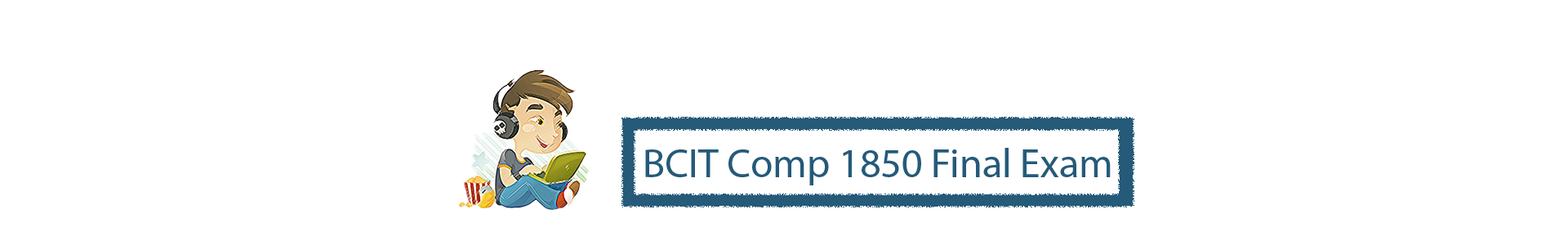
<style>
.page{position:relative;width:1568px;height:245px;background:#ffffff}
.page>*{position:absolute;margin:0}
.t1{font:40.8px "MyriadPro-Regular";color:#255a79}
</style>
<div class="page">
<p class="t1" style="left:645px;top:148px;width:466px;height:37px">BCIT Comp 1850 Final Exam</p>
</div>
